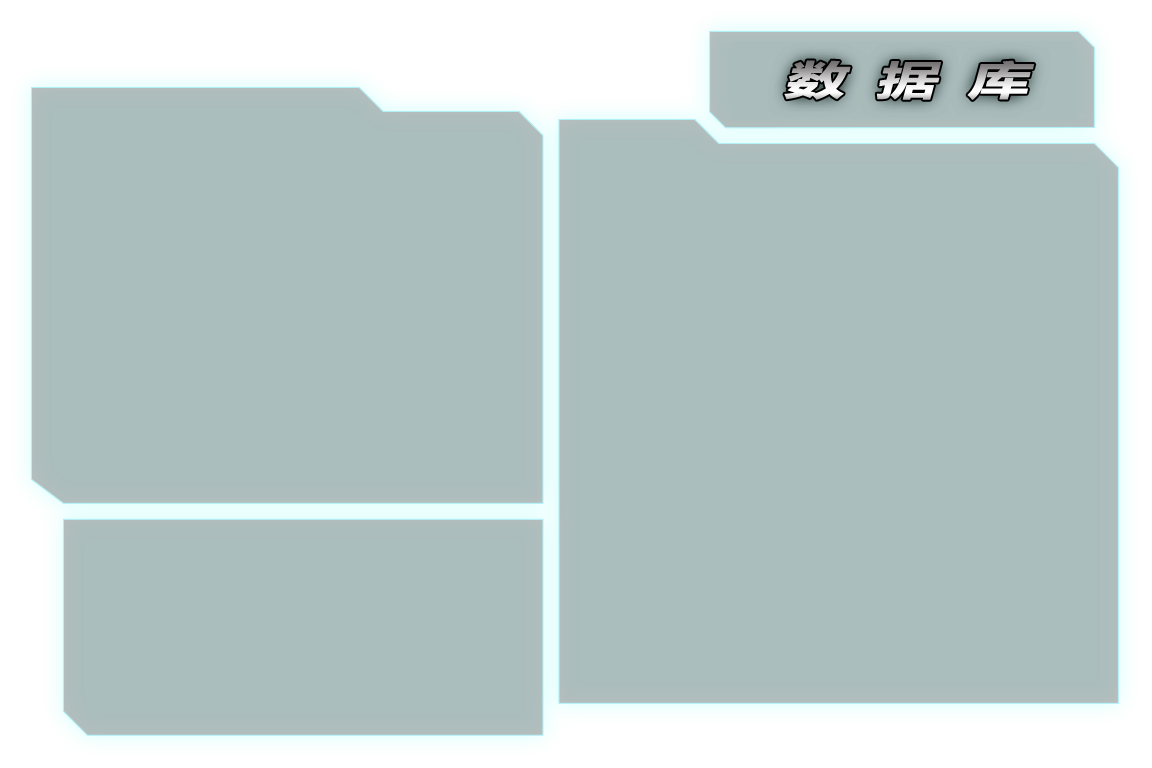
<style>
.page{position:relative;width:1152px;height:768px;background:#aabebd}
.page>*{position:absolute;margin:0}
.t1{font:40px "MicrosoftYaHei-Bold";letter-spacing:0.5em;font-weight:bold;font-style:italic;scale:1.5 1}
</style>
<div class="page">
<p class="t1" style="left:784px;top:60px;width:251px;height:40px">数据库</p>
</div>
